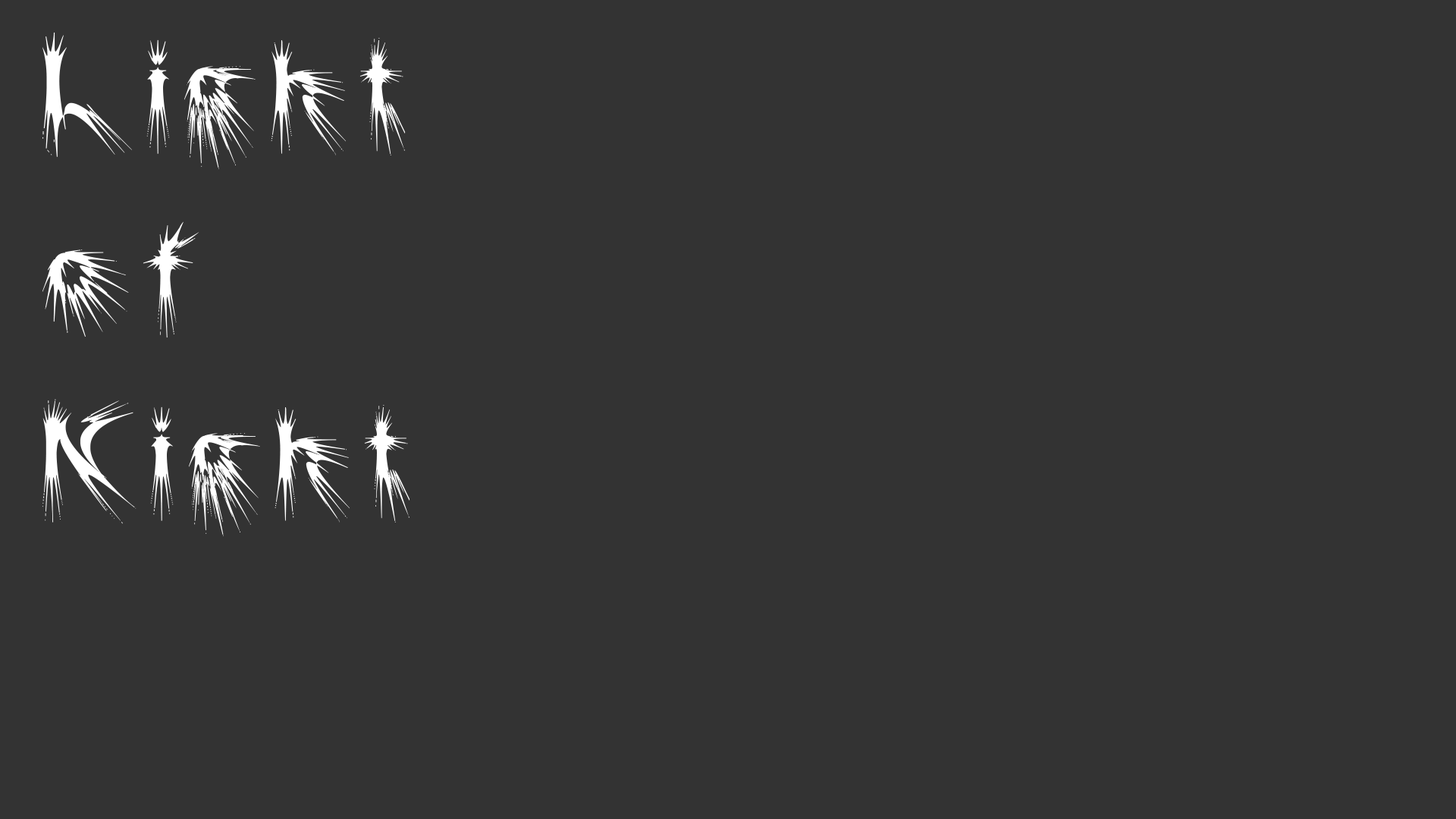
<style>
.page{position:relative;width:1456px;height:819px;background:#333333}
.page>*{position:absolute;margin:0}
.t1{font:153.1px "Puncher";letter-spacing:0.05em;color:#ffffff}
</style>
<div class="page">
<p class="t1" style="left:42px;top:32px;width:368px;height:504px">Light<br>of<br>Night</p>
</div>
